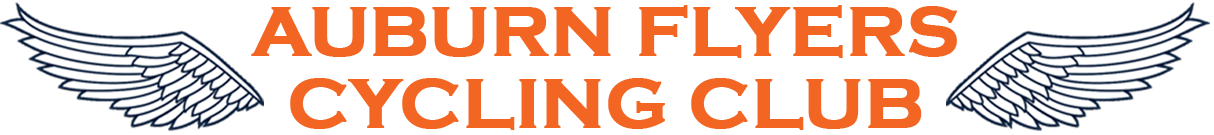
<style>
.page{position:relative;width:1214px;height:135px;background:#ffffff}
.page>*{position:absolute;margin:0}
.t1{font:72px/72px "CopperplateGothic-Bold";color:#f26522;text-transform:uppercase;font-weight:bold}
</style>
<div class="page">
<p class="t1" style="left:251px;top:5px;width:706px;height:125px;text-align:center">Auburn Flyers<br>Cycling Club</p>
</div>
